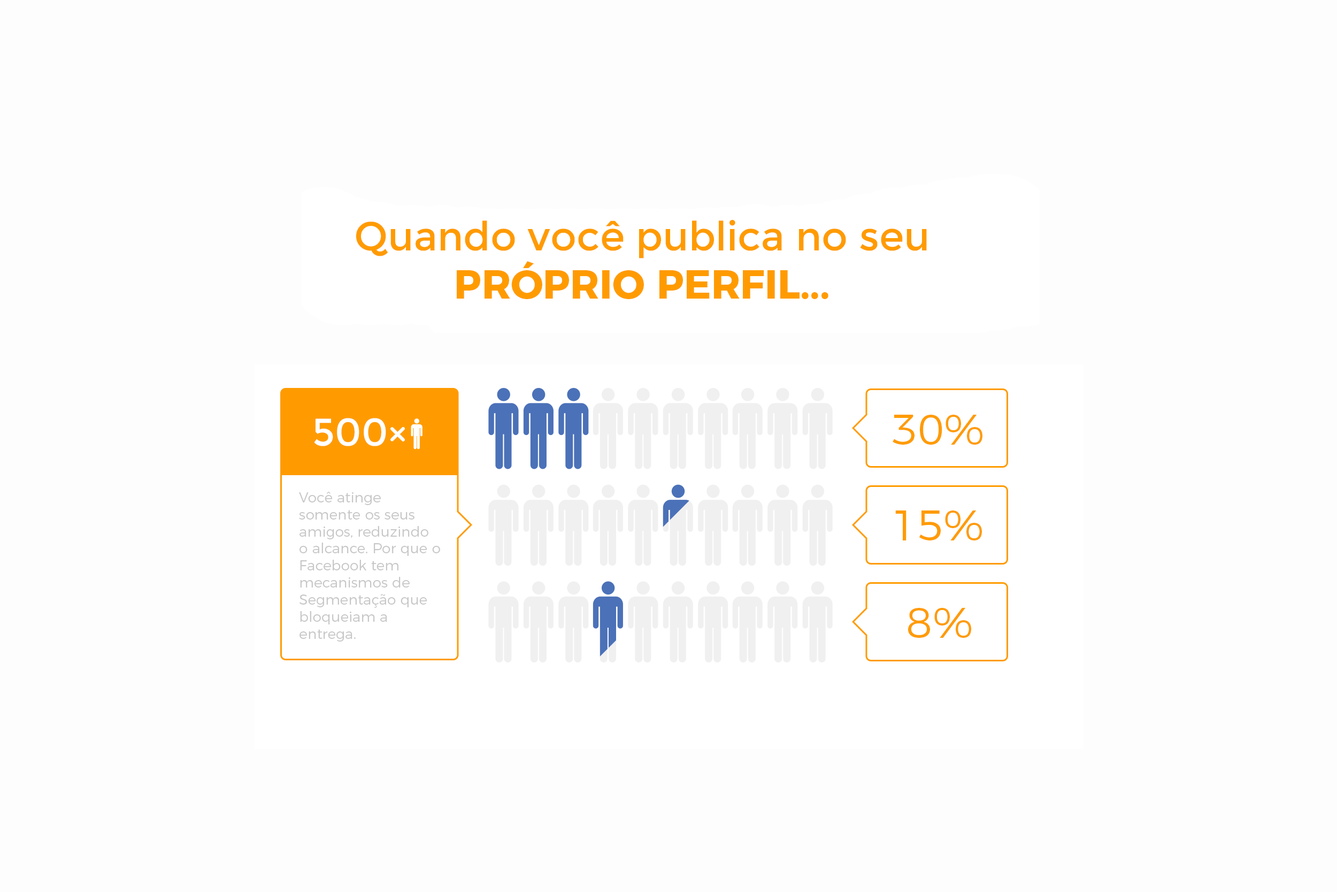
<style>
.page{position:relative;width:1337px;height:892px;background:#fdfdfd}
.page>*{position:absolute;margin:0}
.t1{font:40.2px "Montserrat-Regular";color:#ff9b00}
.t2{font:40.2px "Montserrat-Bold";color:#ff9b00}
.t3{font:38.5px "Montserrat-Regular";color:#ffffff}
.t4{font:42.7px "Montserrat-Light";color:#ff9b00}
.t5{font:14.2px "Montserrat-Light";color:#c7c7c7}
</style>
<div class="page">
<p class="t1" style="left:356px;top:220px;width:571px;height:79px;text-align:center">Quando você publica no seu<br><span class="t2">PRÓPRIO PERFIL...</span></p>
<p class="t3" style="left:314px;top:418px;width:72px;height:28px">500</p>
<p class="t4" style="left:893px;top:415px;width:90px;height:30px">30%</p>
<p class="t5" style="left:299px;top:492px;width:141px;height:149px">Você atinge somente os seus amigos, reduzindo o alcance. Por que o Facebook tem mecanismos de Segmentação que bloqueiam a entrega.</p>
<p class="t4" style="left:895px;top:510px;width:87px;height:30px">15%</p>
<p class="t4" style="left:908px;top:608px;width:63px;height:30px">8%</p>
</div>
